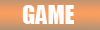
<style>
.page{position:relative;width:100px;height:30px}
.page>*{position:absolute;margin:0}
.t1{font:24px "Impact";color:#fefdfc}
</style>
<div class="page">
<p class="t1" style="left:22px;top:5px;width:52px;height:19px">GAME</p>
</div>
